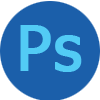
<style>
.page{position:relative;width:100px;height:100px;background:#1b5faa}
.page>*{position:absolute;margin:0}
.t1{font:61.6px "Tahoma";letter-spacing:0.01em;color:#52cbf5;font-weight:bold}
</style>
<div class="page">
<p class="t1" style="left:20px;top:25px;width:62px;height:47px">Ps</p>
</div>
